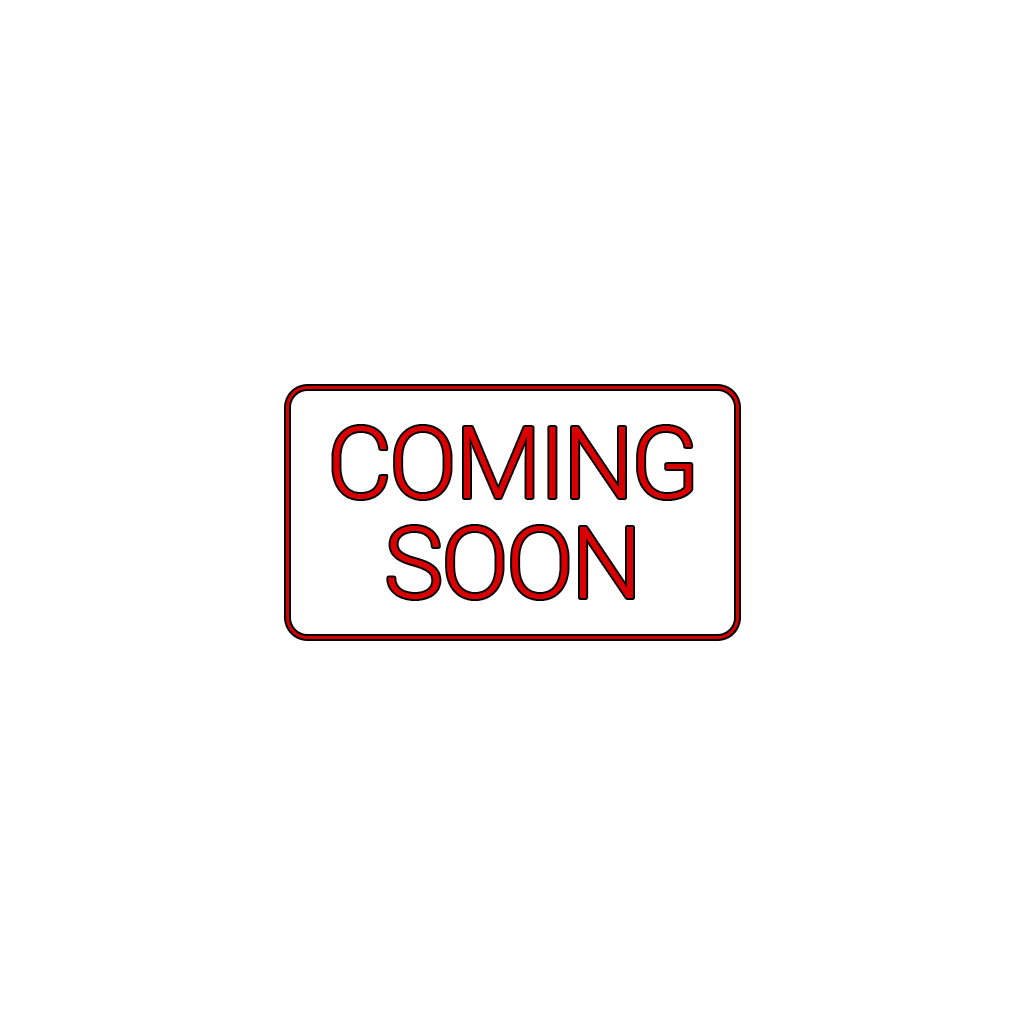
<style>
.page{position:relative;width:1024px;height:1024px;background:#ffffff}
.page>*{position:absolute;margin:0}
.t1{font:100px/100px "Heebo-Light";letter-spacing:-0.025em;color:#d80000}
</style>
<div class="page">
<p class="t1" style="left:333px;top:426px;width:359px;height:173px;text-align:center">COMING<br>SOON</p>
</div>
